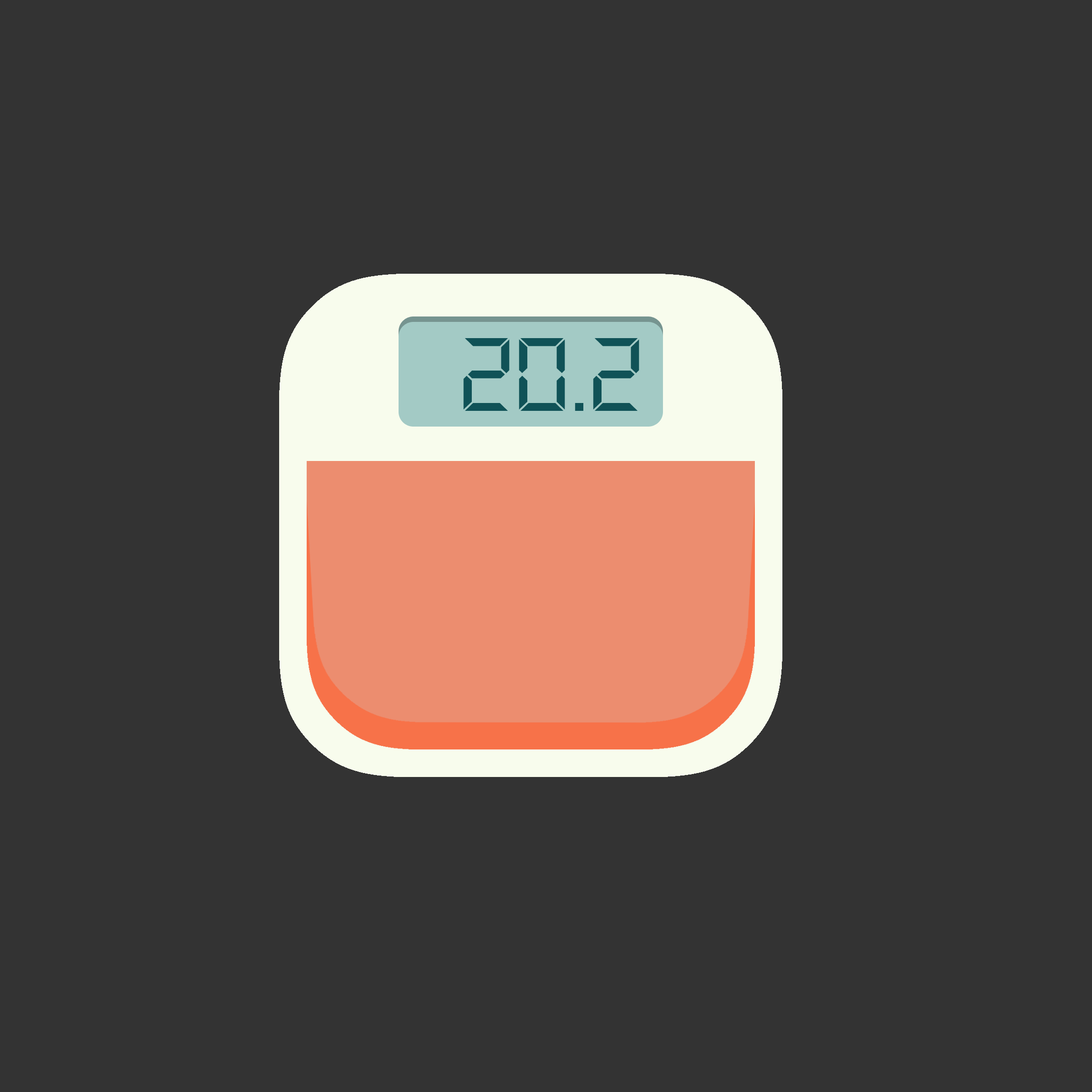
<style>
.page{position:relative;width:1092px;height:1092px;background:#333333}
.page>*{position:absolute;margin:0}
.t1{font:114.3px "DS-Digital";letter-spacing:-0.025em;color:#105257;scale:1.05 1}
</style>
<div class="page">
<p class="t1" style="left:463px;top:338px;width:176px;height:73px">20.2</p>
</div>
